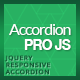
<style>
.page{position:relative;width:80px;height:80px;background:#28b162}
.page>*{position:absolute;margin:0}
.t1{font:16px "Lato-Regular";letter-spacing:-0.075em;color:#ffffff}
.t2{font:15px "HelveticaNeue-Bold";letter-spacing:-0.075em;color:#ffffff;scale:0.96 1}
.t3{font:6px/7px "DroidSans";letter-spacing:0.08em;color:#105834;scale:1.18 1}
</style>
<div class="page">
<p class="t1" style="left:9px;top:24px;width:62px;height:11px">Accordion</p>
<p class="t2" style="left:24px;top:39px;width:47px;height:11px">PRO JS</p>
<p class="t3" style="left:4px;top:55px;width:46px;height:20px">JQUERY<br>RESPONSIVE<br>ACCORDION</p>
</div>
